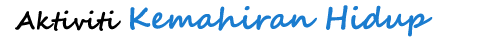
<style>
.page{position:relative;width:500px;height:42px;background:#ffffff}
.page>*{position:absolute;margin:0}
.t1{font:30px "SegoeScript-Bold";color:#1a7ccf}
.t2{font:24px "SegoeScript-Bold";color:#000000}
</style>
<div class="page">
<p class="t1" style="left:15px;top:5px;width:418px;height:32px"><span class="t2">Aktiviti </span>Kemahiran Hidup</p>
</div>
